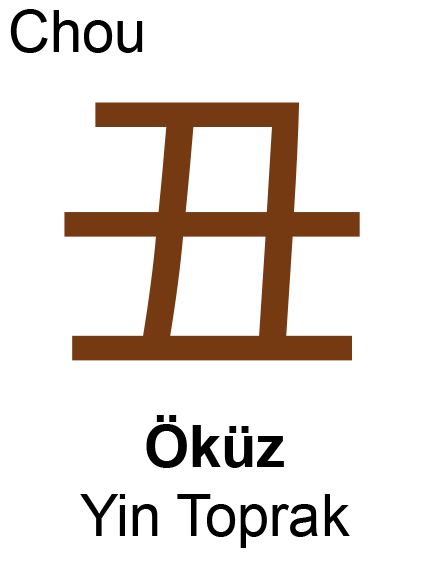
<style>
.page{position:relative;width:429px;height:574px;background:#ffffff}
.page>*{position:absolute;margin:0}
.t1{font:57.8px "ArialMT";color:#000000}
.t2{font:330.5px "MS-Gothic";color:#753a12}
.t3{font:57.8px "Arial-BoldMT";color:#000000}
</style>
<div class="page">
<p class="t1" style="left:10px;top:9px;width:133px;height:44px">Chou</p>
<p class="t2" style="left:64px;top:102px;width:296px;height:259px">丑</p>
<p class="t1" style="left:80px;top:415px;width:270px;height:133px;text-align:center"><span class="t3">Öküz<br></span>Yin Toprak</p>
</div>
